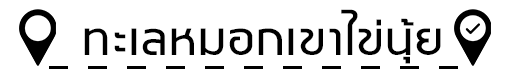
<style>
.page{position:relative;width:512px;height:75px;background:#ffffff}
.page>*{position:absolute;margin:0}
.t1{font:68px "SB-Modern";color:#000000}
</style>
<div class="page">
<p class="t1" style="left:84px;top:9px;width:357px;height:55px">ทะเลหมอกเขาไข่นุ้ย</p>
</div>
